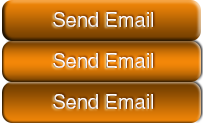
<style>
.page{position:relative;width:203px;height:123px}
.page>*{position:absolute;margin:0}
.t1{font:20px "HelveticaLTStd-Roman"}
</style>
<div class="page">
<p class="t1" style="left:53px;top:12px;width:100px;height:15px">Send Email</p>
<p class="t1" style="left:53px;top:53px;width:100px;height:15px">Send Email</p>
<p class="t1" style="left:53px;top:94px;width:100px;height:15px">Send Email</p>
</div>
